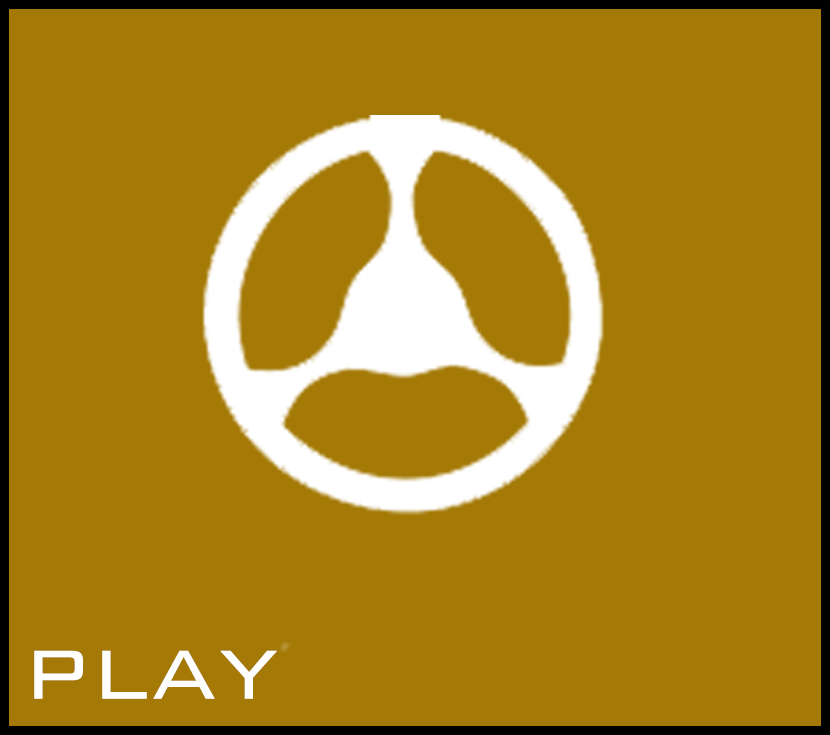
<style>
.page{position:relative;width:830px;height:735px;background:#a47905}
.page>*{position:absolute;margin:0}
.t1{font:92.5px "BankGothic-Light";color:#ffffff}
</style>
<div class="page">
<p class="t1" style="left:34px;top:650px;width:243px;height:49px">PLAY</p>
</div>
